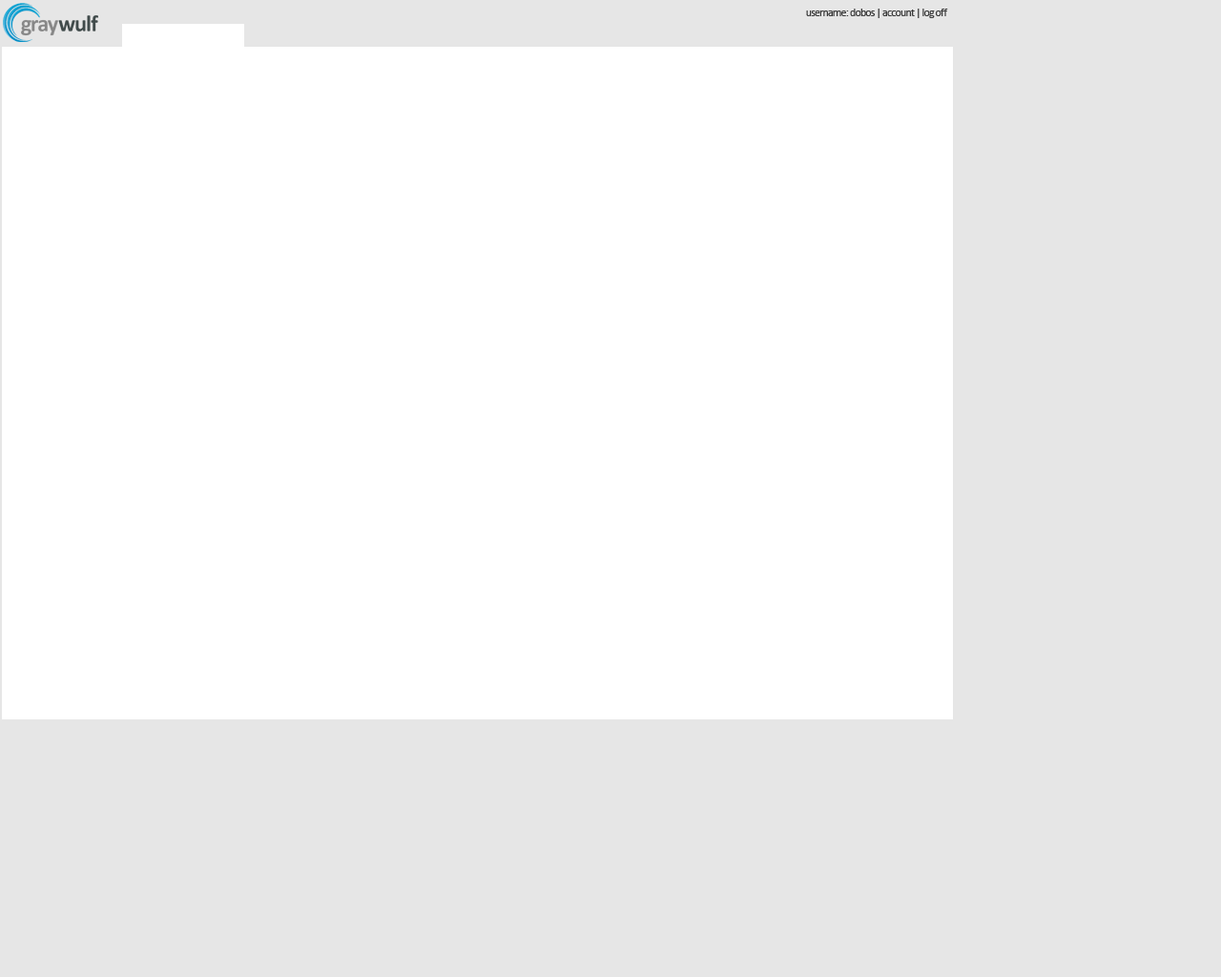
<style>
.page{position:relative;width:1221px;height:977px;background:#ffffff}
.page>*{position:absolute;margin:0}
.t1{font:11.4px "Calibri";letter-spacing:-0.07em;color:#3b3b3b}
</style>
<div class="page">
<p class="t1" style="left:806px;top:9px;width:142px;height:9px">username: dobos | account | log off</p>
</div>
